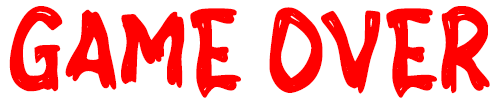
<style>
.page{position:relative;width:500px;height:106px;background:#ffffff}
.page>*{position:absolute;margin:0}
.t1{font:109.3px "fFrogToad";color:#ff0000;text-transform:uppercase}
</style>
<div class="page">
<p class="t1" style="left:9px;top:6px;width:481px;height:92px">Game Over</p>
</div>
